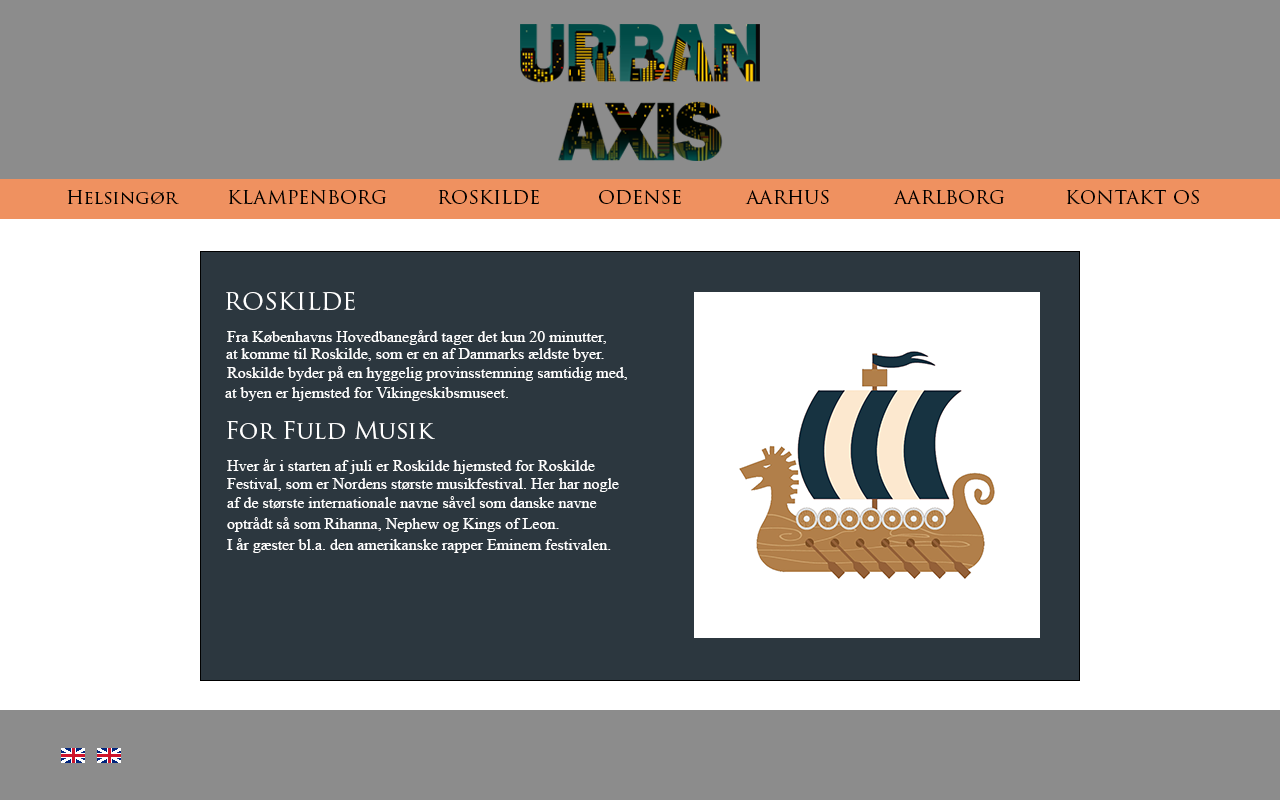
<style>
.page{position:relative;width:1280px;height:800px;background:#ffffff}
.page>*{position:absolute;margin:0}
.t1{font:18.7px "TrajanPro3-Regular";color:#000000}
.t2{font:24px "TrajanPro3-Regular";color:#ffffff}
.t3{font:12px "TimesNewRomanPSMT";color:#ffffff}
</style>
<div class="page">
<p class="t1" style="left:67px;top:190px;width:112px;height:15px">Helsingør</p>
<p class="t1" style="left:228px;top:190px;width:159px;height:14px">KLAMPENBORG</p>
<p class="t1" style="left:438px;top:190px;width:101px;height:15px">ROSKILDE</p>
<p class="t1" style="left:599px;top:190px;width:82px;height:15px">ODENSE</p>
<p class="t1" style="left:745px;top:190px;width:84px;height:14px">AARHUS</p>
<p class="t1" style="left:893px;top:190px;width:112px;height:14px">AARLBORG</p>
<p class="t1" style="left:1066px;top:190px;width:133px;height:14px">KONTAKT OS</p>
<p class="t2" style="left:226px;top:292px;width:129px;height:19px">ROSKILDE</p>
<p class="t3" style="left:227px;top:330px;width:379px;height:15px">Fra Københavns Hovedbanegård tager det kun 20 minutter,</p>
<p class="t3" style="left:226px;top:348px;width:378px;height:14px">at komme til Roskilde, som er en af Danmarks ældste byer.</p>
<p class="t3" style="left:227px;top:366px;width:400px;height:15px">Roskilde byder på en hyggelig provinsstemning samtidig med,</p>
<p class="t3" style="left:225px;top:387px;width:283px;height:14px">at byen er hjemsted for Vikingeskibsmuseet.</p>
<p class="t2" style="left:227px;top:421px;width:208px;height:19px">For Fuld Musik</p>
<p class="t3" style="left:227px;top:459px;width:368px;height:15px">Hver år i starten af juli er Roskilde hjemsted for Roskilde</p>
<p class="t3" style="left:227px;top:478px;width:392px;height:14px">Festival, som er Nordens største musikfestival. Her har nogle</p>
<p class="t3" style="left:227px;top:496px;width:370px;height:13px">af de største internationale navne såvel som danske navne</p>
<p class="t3" style="left:227px;top:517px;width:332px;height:15px">optrådt så som Rihanna, Nephew og Kings of Leon.</p>
<p class="t3" style="left:227px;top:538px;width:384px;height:15px">I år gæster bl.a. den amerikanske rapper Eminem festivalen.</p>
</div>
